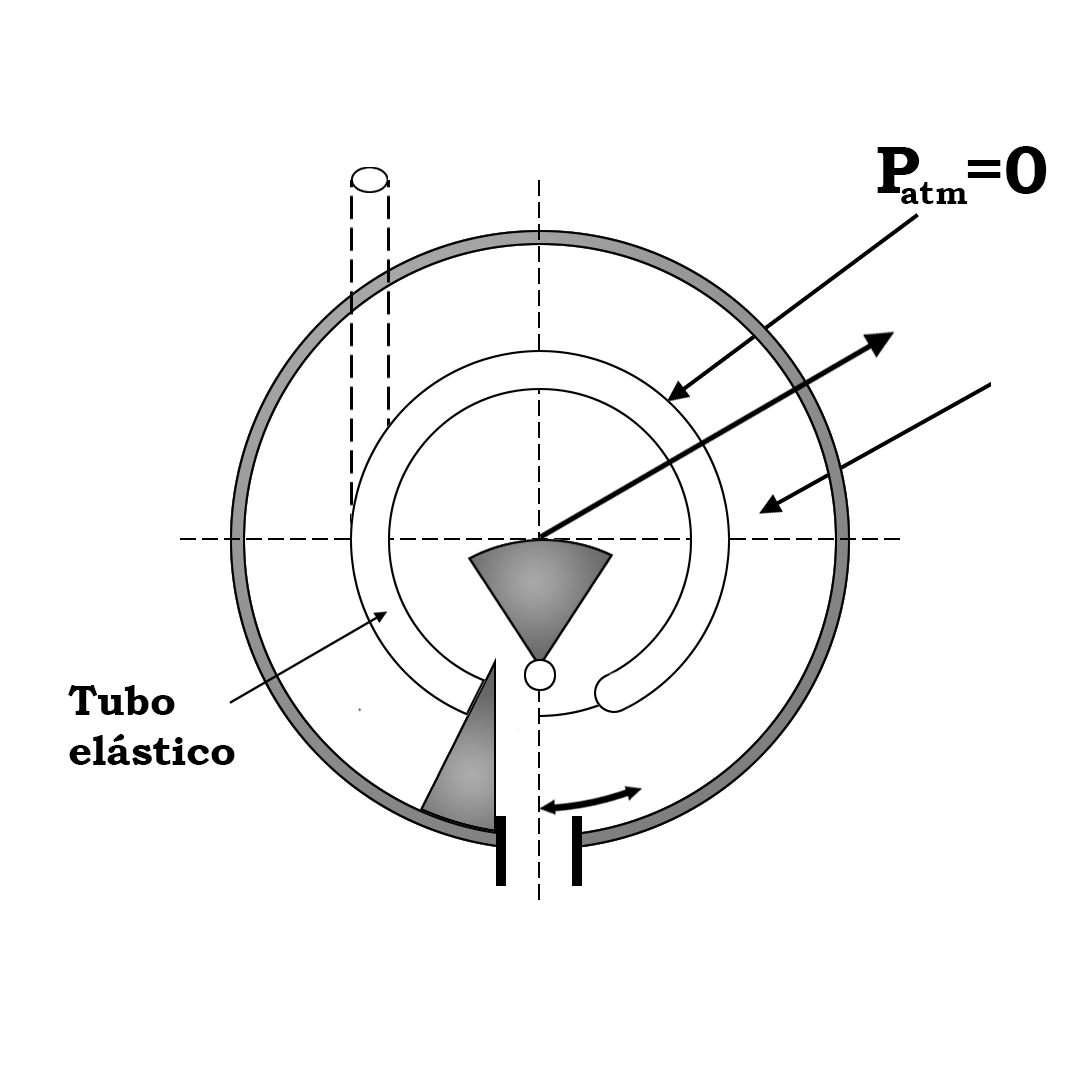
<style>
.page{position:relative;width:1080px;height:1080px;background:#ffffff}
.page>*{position:absolute;margin:0}
.t1{font:66.7px "BookmanOldStyle-Bold";color:#000000}
.t2{font:33.3px "BookmanOldStyle-Bold";color:#000000}
.t3{font:41.7px "BookmanOldStyle-Bold";color:#000000}
</style>
<div class="page">
<p class="t1" style="left:877px;top:146px;width:170px;height:48px">P  =0</p>
<p class="t2" style="left:901px;top:182px;width:66px;height:22px">atm</p>
<p class="t3" style="left:68px;top:685px;width:167px;height:80px">Tubo<br>elástico</p>
</div>
